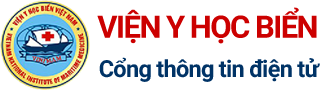
<style>
.page{position:relative;width:320px;height:90px;background:#ffffff}
.page>*{position:absolute;margin:0}
.t1{font:31px "Roboto-Bold";letter-spacing:-0.05em;color:#cc0000}
.t2{font:23.5px "Roboto-Bold";letter-spacing:-0.03em;color:#003366}
</style>
<div class="page">
<p class="t1" style="left:97px;top:7px;width:220px;height:37px">VIỆN Y HỌC BIỂN</p>
<p class="t2" style="left:99px;top:57px;width:221px;height:25px">Cổng thông tin điện tử</p>
</div>
